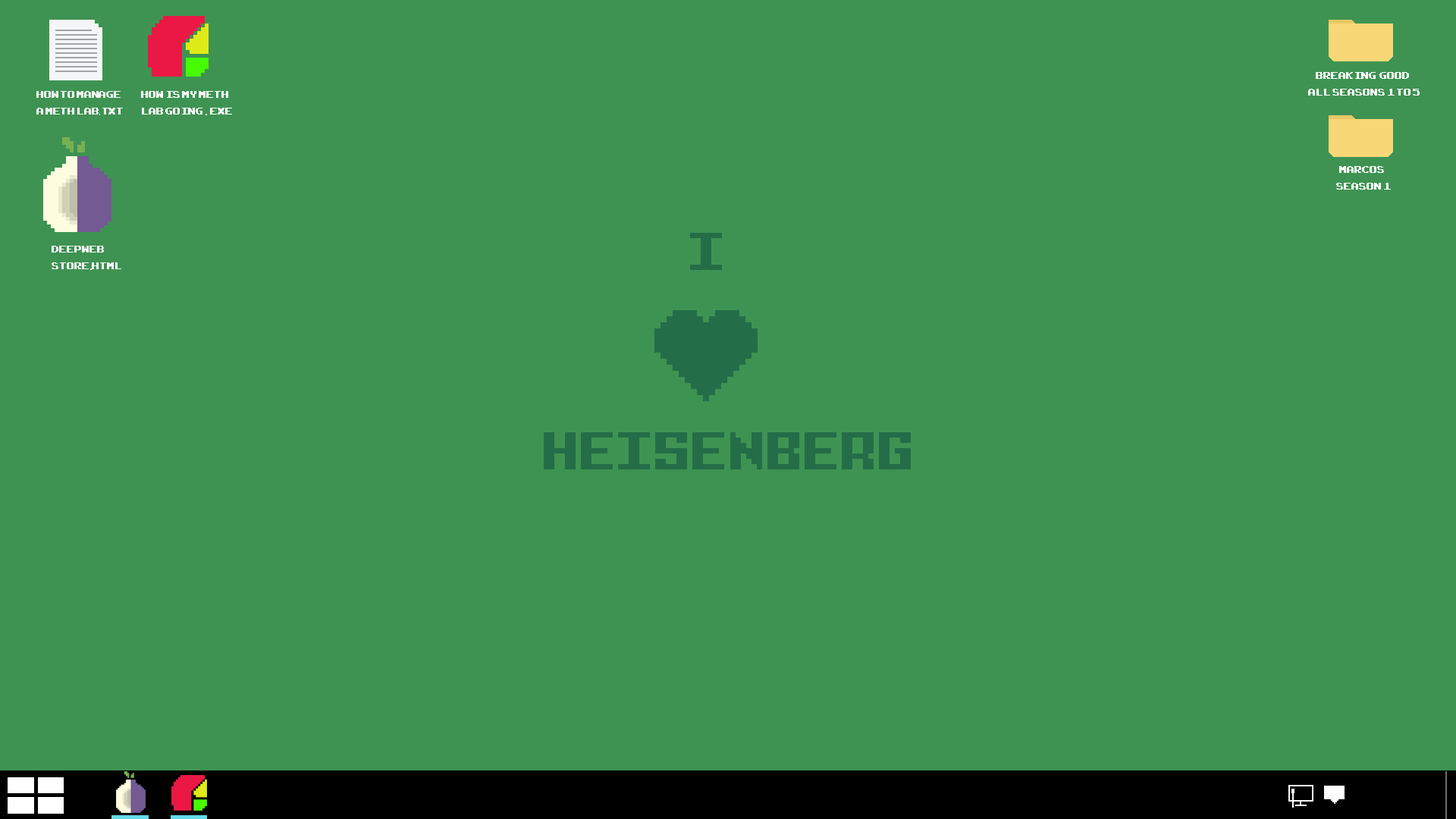
<style>
.page{position:relative;width:1456px;height:819px;background:#3e9352}
.page>*{position:absolute;margin:0}
.t1{font:13.6px "ArcadeClassic";color:#ffffff}
.t2{font:13.6px "ArcadeClassic";color:#f5f6f7}
.t3{font:13.6px "AgencyFB-Reg";color:#f5f6f7}
.t4{font:13.6px "MyriadPro-Regular";color:#ffffff}
.t5{font:54.6px "PixelIntv";color:#236e48}
.t6{font:13.6px "MyriadPro-Regular";color:#f5f6f7}
</style>
<div class="page">
<p class="t1" style="left:1308px;top:72px;width:112px;height:24px">BREAKING  GOOD<br>ALL SEASONS 1 to 5</p>
<p class="t2" style="left:36px;top:91px;width:87px;height:24px">How To Manage<br>a Meth Lab<span class="t3">.</span>txt</p>
<p class="t1" style="left:141px;top:91px;width:91px;height:24px">HOW IS MY METH<br>LAB GOING <span class="t4">. </span>exe</p>
<p class="t1" style="left:1336px;top:166px;width:55px;height:24px">mARCOS<br>SEASON 1</p>
<p class="t5" style="left:690px;top:233px;width:32px;height:37px">I</p>
<p class="t2" style="left:52px;top:246px;width:69px;height:24px">deepweb<br>store<span class="t6">.</span>html</p>
<p class="t5" style="left:544px;top:432px;width:367px;height:37px">HEISENBERG</p>
</div>
